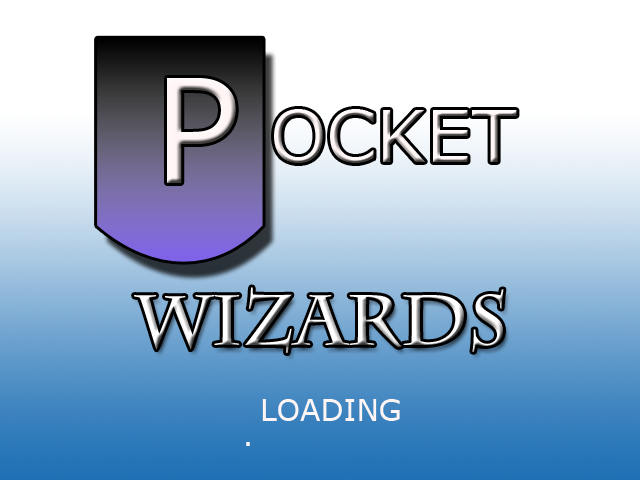
<style>
.page{position:relative;width:640px;height:480px}
.page>*{position:absolute;margin:0}
.t1{font:144px "Verdana";color:#fff5f5}
.t2{font:72px "Verdana";color:#fff5f5}
.t3{font:72px "CharlemagneStd-Bold"}
.t4{font:30px "Verdana";color:#fff5f5}
</style>
<div class="page">
<p class="t1" style="left:167px;top:78px;width:69px;height:105px">P <span class="t2"></span></p>
<p class="t3" style="left:134px;top:287px;width:370px;height:67px">WIZARDS</p>
<p class="t4" style="left:262px;top:399px;width:138px;height:22px">LOADING</p>
<p class="t4" style="left:246px;top:442px;width:4px;height:4px">.</p>
</div>
